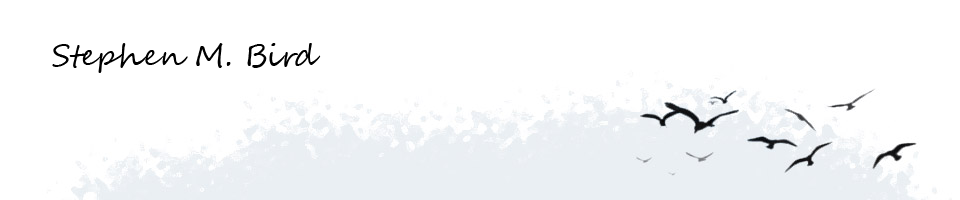
<style>
.page{position:relative;width:960px;height:200px;background:#ffffff}
.page>*{position:absolute;margin:0}
.t1{font:30px "SegoeScript";color:#000000}
</style>
<div class="page">
<p class="t1" style="left:52px;top:43px;width:269px;height:30px">Stephen M. Bird</p>
</div>
